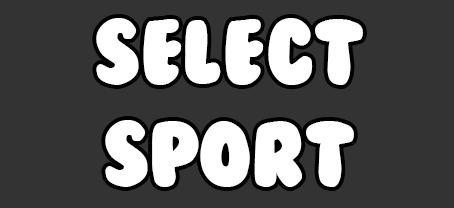
<style>
.page{position:relative;width:454px;height:208px;background:#333333}
.page>*{position:absolute;margin:0}
.t1{font:85px "BubbleGum";color:#ffffff}
</style>
<div class="page">
<p class="t1" style="left:96px;top:18px;width:267px;height:169px;text-align:center">Select<br>sport</p>
</div>
